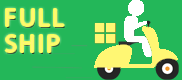
<style>
.page{position:relative;width:182px;height:80px;background:#23b759}
.page>*{position:absolute;margin:0}
.t1{font:25px/26.4px "MyriadPro-Regular";letter-spacing:0.1em;color:#fff772}
</style>
<div class="page">
<p class="t1" style="left:5px;top:9px;width:59px;height:43px">FULL<br>SHIP</p>
</div>
